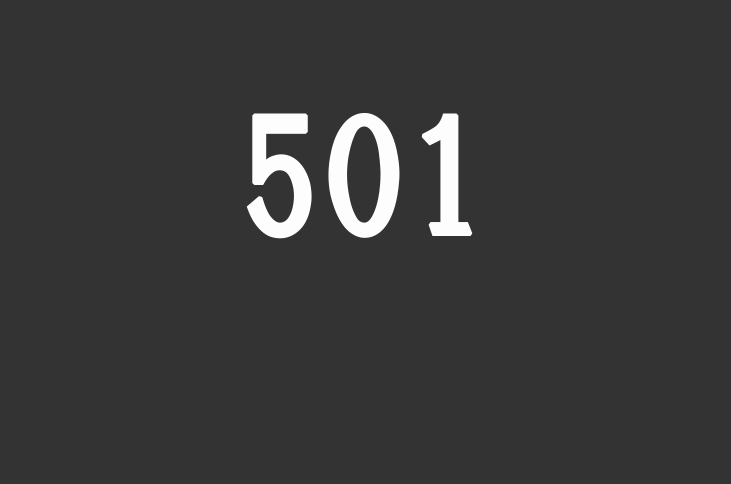
<style>
.page{position:relative;width:731px;height:484px;background:#333333}
.page>*{position:absolute;margin:0}
.t1{font:144px "HGSSoeiPresenceEB";color:#fdfdfd;font-weight:bold}
</style>
<div class="page">
<p class="t1" style="left:246px;top:112px;width:227px;height:127px">501</p>
</div>
